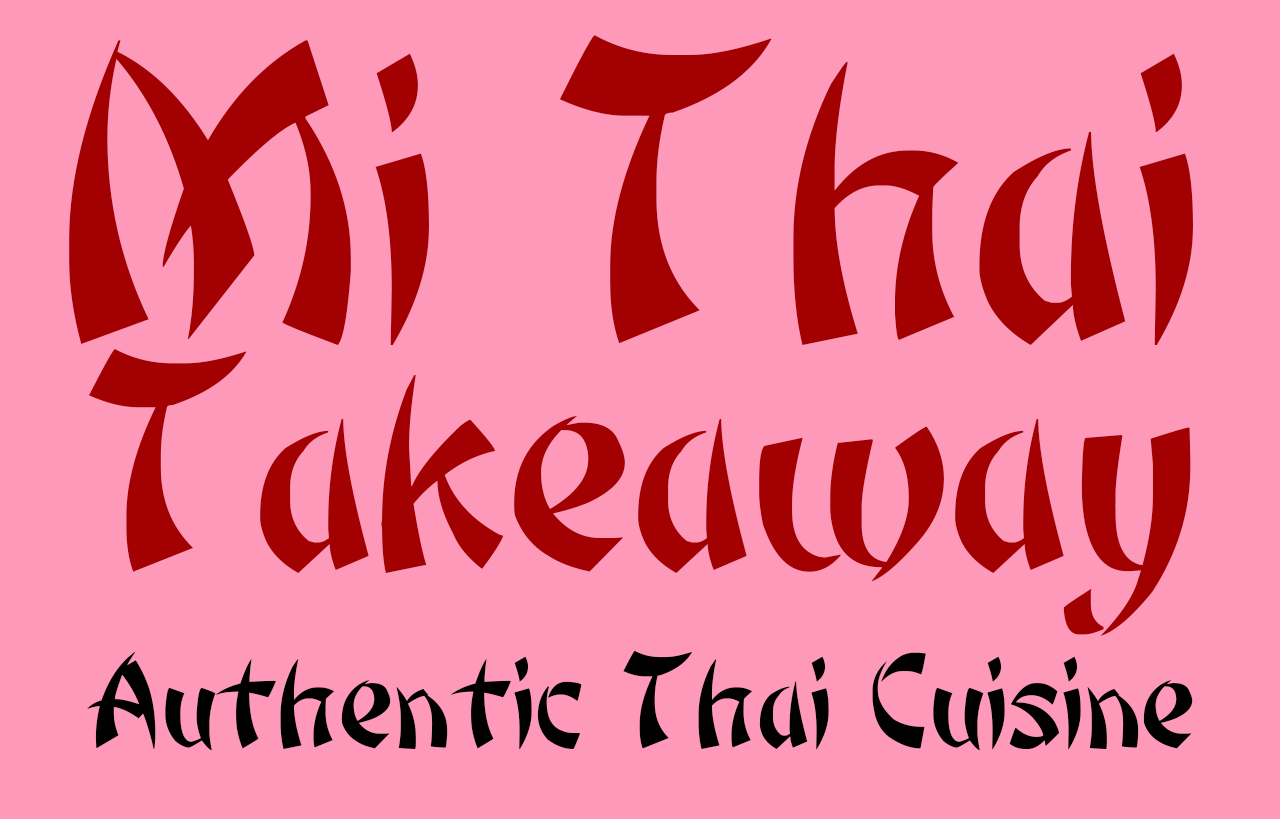
<style>
.page{position:relative;width:1280px;height:819px;background:#fe99b9}
.page>*{position:absolute;margin:0}
.t1{font:527px "BonzaiRegular";letter-spacing:-0.06em;color:#a20001}
.t2{font:380.9px "BonzaiRegular";letter-spacing:-0.06em;color:#a20001}
.t3{font:167px "BonzaiRegular";letter-spacing:-0.06em;color:#000000}
</style>
<div class="page">
<p class="t1" style="left:69px;top:35px;width:1124px;height:310px">Mi Thai</p>
<p class="t2" style="left:89px;top:349px;width:1102px;height:287px">Takeaway</p>
<p class="t3" style="left:87px;top:650px;width:1106px;height:101px">Authentic Thai Cuisine</p>
</div>
